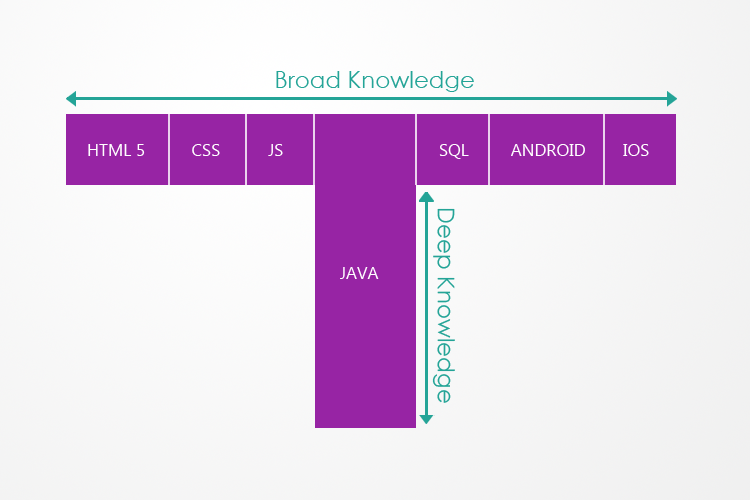
<style>
.page{position:relative;width:750px;height:500px}
.page>*{position:absolute;margin:0}
.t1{font:23px "CenturyGothic";color:#24a497}
.t2{font:17px "MyanmarText";color:#ffffff}
</style>
<div class="page">
<p class="t1" style="left:276px;top:71px;width:198px;height:21px">Broad Knowledge</p>
<p class="t2" style="left:88px;top:144px;width:561px;height:15px">HTML 5        CSS         JS          SQL         ANDROID        IOS</p>
<p class="t1" style="left:432px;top:208px;width:23px;height:195px;rotate:90deg">Deep Knowledge</p>
<p class="t2" style="left:340px;top:267px;width:39px;height:12px">JAVA</p>
</div>
